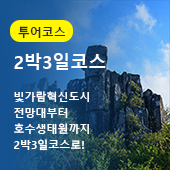
<style>
.page{position:relative;width:170px;height:170px}
.page>*{position:absolute;margin:0}
.t1{font:11px/16px "MalgunGothicBold";color:#ffffff}
.t2{font:12px/16px "MalgunGothicBold";color:#2e2e2e}
.t3{font:18px/16px "MalgunGothicBold";color:#ffffff}
</style>
<div class="page">
<p class="t1" style="left:14px;top:26px;width:92px;height:125px"><span class="t2"> 투어코스<br><br></span><span class="t3">2박3일코스<br><br></span>빛가람혁신도시<br>전망대부터<br>호수생태원까지<br>2박3일코스로!</p>
</div>
